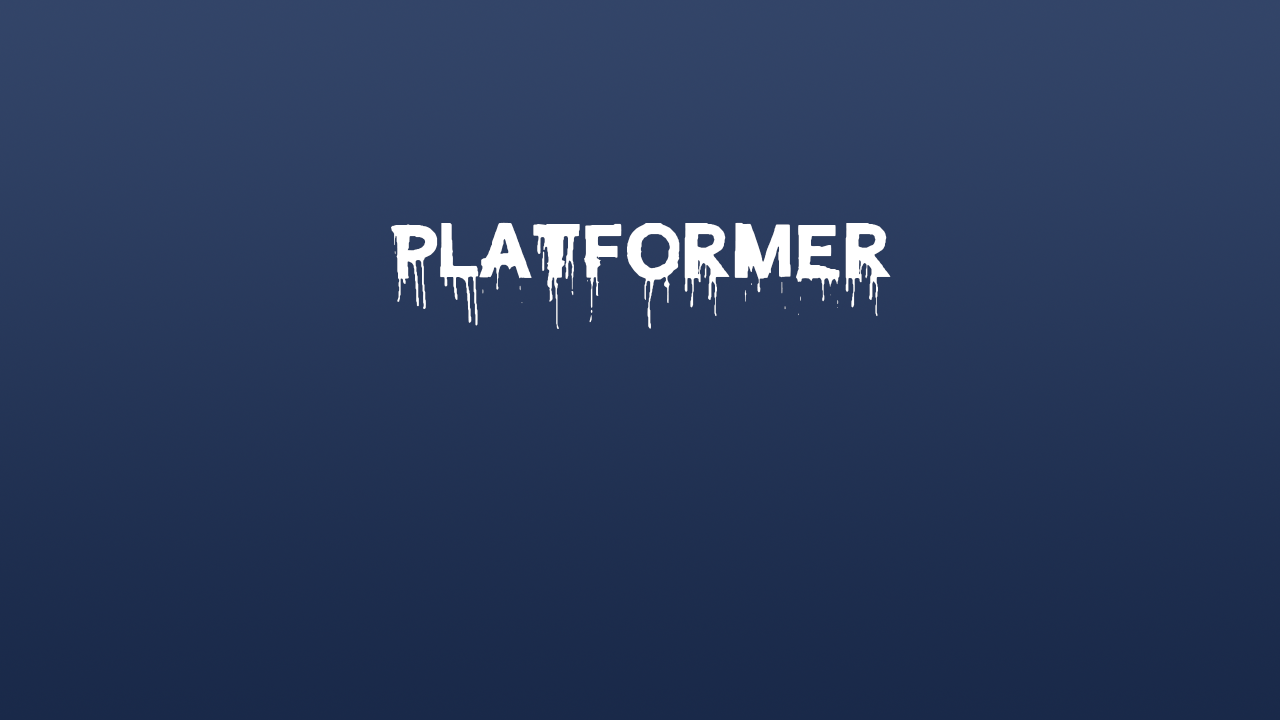
<style>
.page{position:relative;width:1280px;height:720px}
.page>*{position:absolute;margin:0}
.t1{font:120px "BloodLust";color:#ffffff}
</style>
<div class="page">
<p class="t1" style="left:391px;top:222px;width:500px;height:107px">Platformer</p>
</div>
